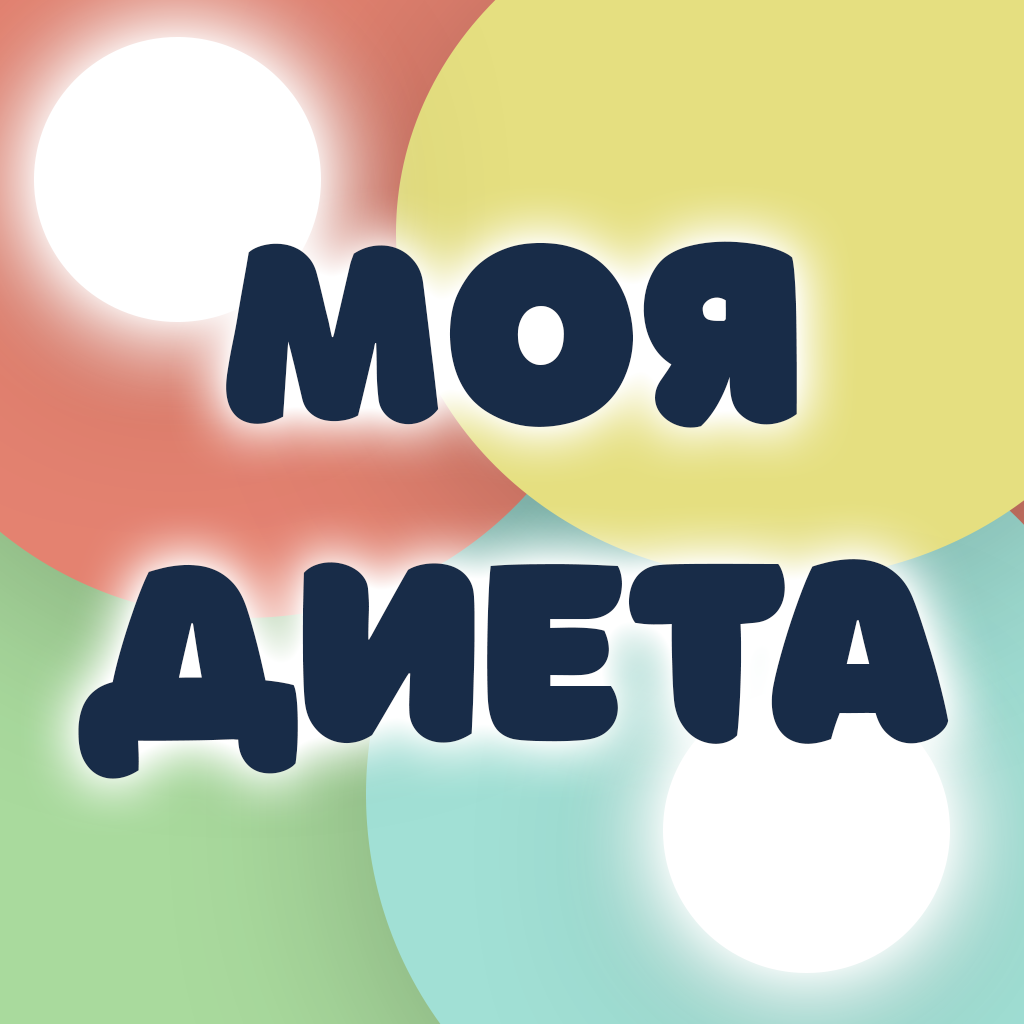
<style>
.page{position:relative;width:1024px;height:1024px}
.page>*{position:absolute;margin:0}
.t1{font:264px "Borsok";color:#182c48}
</style>
<div class="page">
<p class="t1" style="left:78px;top:241px;width:871px;height:538px;text-align:center">МОЯ<br>диета</p>
</div>
